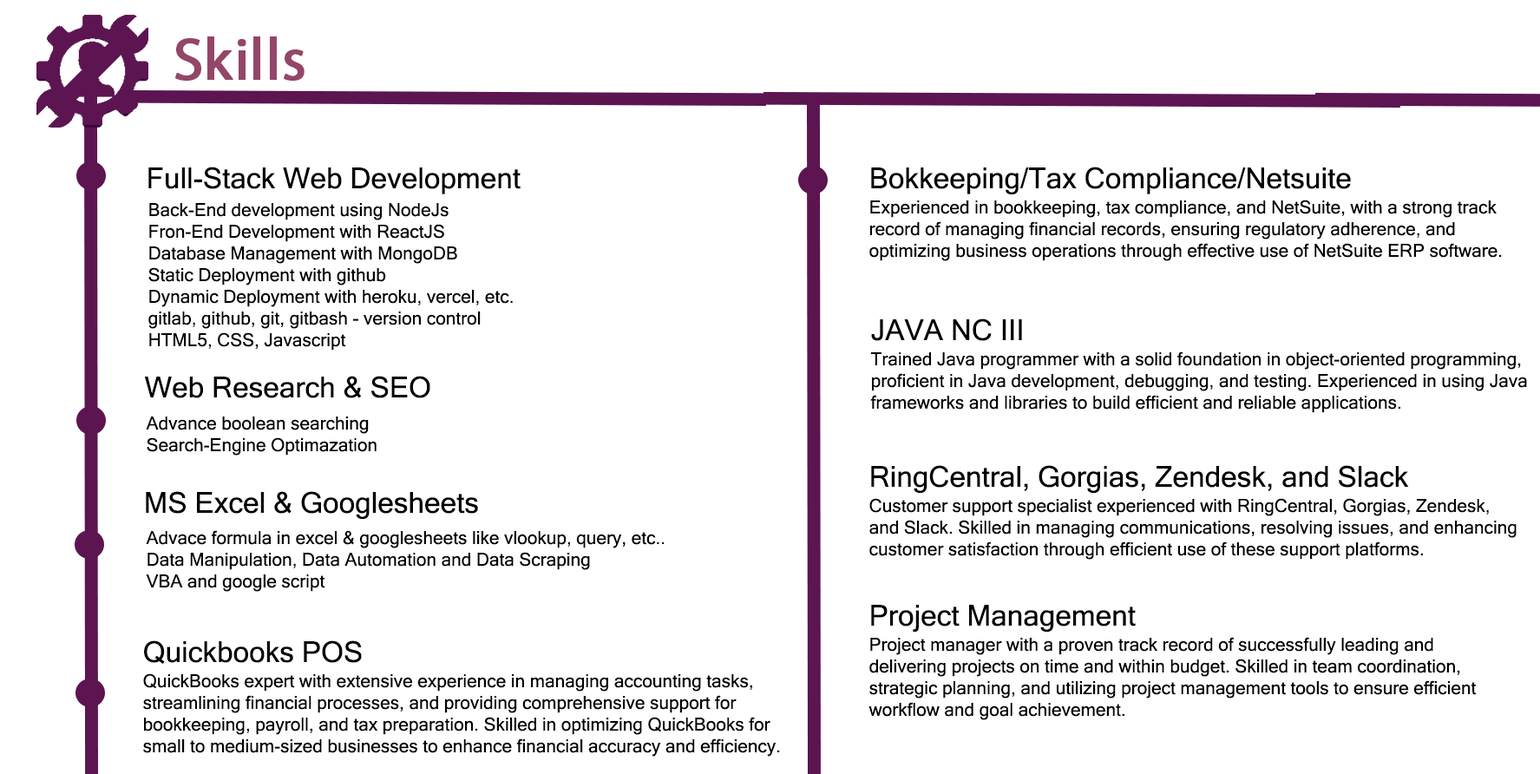
<style>
.page{position:relative;width:1540px;height:774px;background:#ffffff}
.page>*{position:absolute;margin:0}
.t1{font:59.5px "MyriadPro-Regular";color:#944668;font-weight:bold}
.t2{font:28.9px "MicrosoftSansSerif";color:#000000}
.t3{font:18.1px "MicrosoftSansSerif";color:#000000}
</style>
<div class="page">
<p class="t1" style="left:175px;top:36px;width:130px;height:45px">Skills</p>
<p class="t2" style="left:148px;top:167px;width:373px;height:27px">Full-Stack Web Development</p>
<p class="t2" style="left:871px;top:167px;width:480px;height:27px">Bokkeeping/Tax Compliance/Netsuite</p>
<p class="t3" style="left:148px;top:203px;width:365px;height:148px">Back-End development using NodeJs<br>Fron-End Development with ReactJS<br>Database Management with MongoDB<br>Static Deployment with github<br>Dynamic Deployment with heroku, vercel, etc.<br>gitlab, github, git, gitbash - version control<br>HTML5, CSS, Javascript</p>
<p class="t3" style="left:870px;top:200px;width:632px;height:61px">Experienced in bookkeeping, tax compliance, and NetSuite, with a strong track <br>record of managing financial records, ensuring regulatory adherence, and <br>optimizing business operations through effective use of NetSuite ERP software.</p>
<p class="t2" style="left:871px;top:318px;width:151px;height:23px">JAVA NC III</p>
<p class="t3" style="left:870px;top:351px;width:657px;height:62px">Trained Java programmer with a solid foundation in object-oriented programming, <br>proficient in Java development, debugging, and testing. Experienced in using Java <br>frameworks and libraries to build efficient and reliable applications.</p>
<p class="t2" style="left:145px;top:376px;width:285px;height:22px">Web Research &amp; SEO</p>
<p class="t3" style="left:146px;top:417px;width:231px;height:39px">Advance boolean searching<br>Search-Engine Optimazation</p>
<p class="t2" style="left:871px;top:465px;width:538px;height:28px">RingCentral, Gorgias, Zendesk, and Slack</p>
<p class="t2" style="left:146px;top:491px;width:332px;height:28px">MS Excel &amp; Googlesheets</p>
<p class="t3" style="left:870px;top:498px;width:647px;height:62px">Customer support specialist experienced with RingCentral, Gorgias, Zendesk, <br>and Slack. Skilled in managing communications, resolving issues, and enhancing <br>customer satisfaction through efficient use of these support platforms.</p>
<p class="t3" style="left:146px;top:530px;width:519px;height:62px">Advace formula in excel &amp; googlesheets like vlookup, query, etc..<br>Data Manipulation, Data Automation and Data Scraping<br>VBA and google script</p>
<p class="t2" style="left:871px;top:605px;width:265px;height:27px">Project Management</p>
<p class="t2" style="left:144px;top:640px;width:218px;height:24px">Quickbooks POS</p>
<p class="t3" style="left:869px;top:637px;width:608px;height:83px">Project manager with a proven track record of successfully leading and <br>delivering projects on time and within budget. Skilled in team coordination, <br>strategic planning, and utilizing project management tools to ensure efficient <br>workflow and goal achievement.</p>
<p class="t3" style="left:143px;top:673px;width:637px;height:84px">QuickBooks expert with extensive experience in managing accounting tasks, <br>streamlining financial processes, and providing comprehensive support for <br>bookkeeping, payroll, and tax preparation. Skilled in optimizing QuickBooks for <br>small to medium-sized businesses to enhance financial accuracy and efficiency.</p>
</div>
